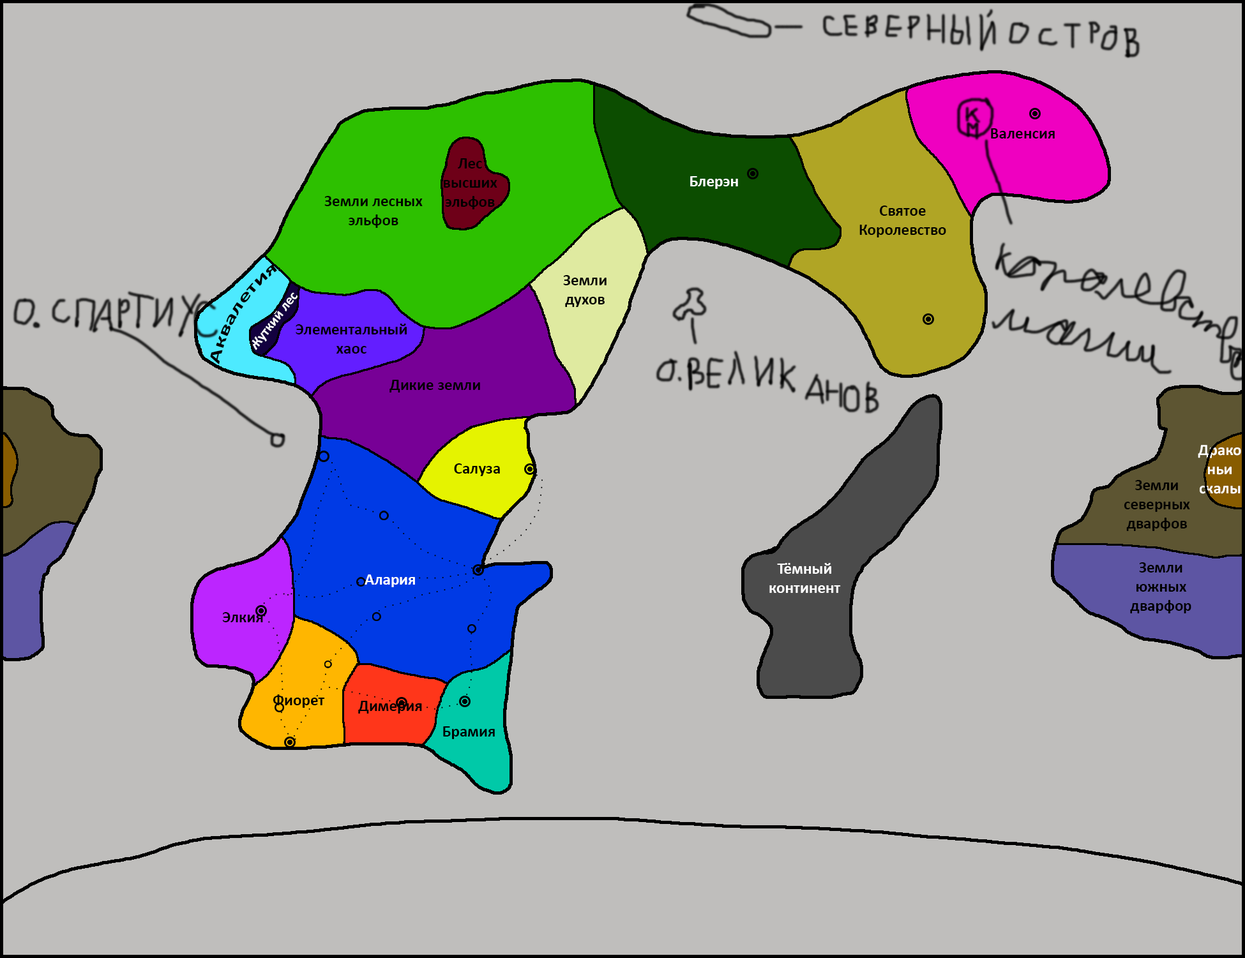
<style>
.page{position:relative;width:1245px;height:958px;background:#bfbebc}
.page>*{position:absolute;margin:0}
.t1{font:16px "Calibri-Bold";color:#000000}
.t2{font:16px "Calibri-Bold";color:#ffffff}
.t3{font:14px "Calibri-Bold";color:#ffffff}
</style>
<div class="page">
<p class="t1" style="left:991px;top:128px;width:63px;height:11px">Валенсия</p>
<p class="t1" style="left:444px;top:158px;width:53px;height:51px;text-align:center">Лес высших эльфов</p>
<p class="t2" style="left:690px;top:176px;width:48px;height:13px">Блерэн</p>
<p class="t1" style="left:324px;top:196px;width:99px;height:32px;text-align:center">Земли лесных эльфов</p>
<p class="t1" style="left:859px;top:206px;width:87px;height:31px;text-align:center">Святое Королевство</p>
<p class="t1" style="left:210px;top:264px;width:67px;height:100px;rotate:-58deg">Аквалетия</p>
<p class="t1" style="left:563px;top:275px;width:43px;height:32px;text-align:center">Земли духов</p>
<p class="t3" style="left:249px;top:292px;width:48px;height:58px;rotate:-52deg">Жуткий лес</p>
<p class="t1" style="left:296px;top:324px;width:111px;height:30px;text-align:center">Элементальный хаос</p>
<p class="t1" style="left:389px;top:380px;width:91px;height:13px">Дикие земли</p>
<p class="t2" style="left:1197px;top:445px;width:44px;height:49px;text-align:center">Драконьи скалы</p>
<p class="t1" style="left:454px;top:463px;width:46px;height:13px">Салуза</p>
<p class="t1" style="left:1123px;top:480px;width:67px;height:51px;text-align:center">Земли северных дварфов</p>
<p class="t2" style="left:769px;top:563px;width:72px;height:30px;text-align:center">Тёмный континент</p>
<p class="t1" style="left:1130px;top:562px;width:61px;height:51px;text-align:center">Земли южных дварфор</p>
<p class="t2" style="left:364px;top:574px;width:51px;height:13px">Алария</p>
<p class="t1" style="left:222px;top:612px;width:41px;height:10px">Элкия</p>
<p class="t1" style="left:273px;top:694px;width:52px;height:14px">Фиорет</p>
<p class="t1" style="left:358px;top:701px;width:64px;height:13px">Димерия</p>
<p class="t1" style="left:443px;top:726px;width:52px;height:13px">Брамия</p>
</div>
